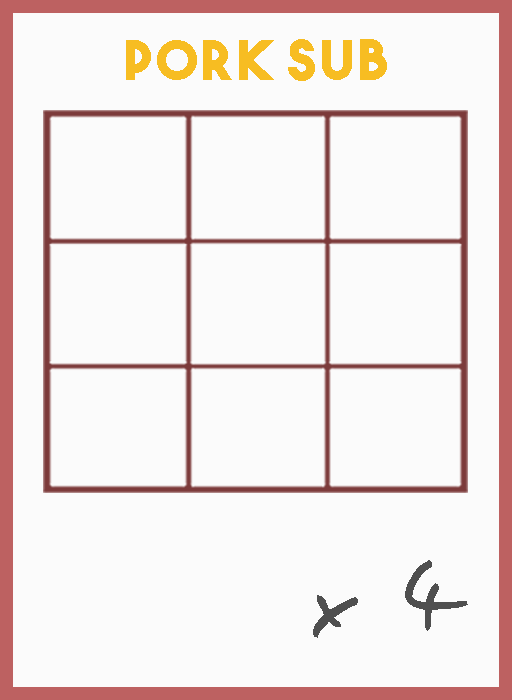
<style>
.page{position:relative;width:512px;height:700px;background:#fbfbfb}
.page>*{position:absolute;margin:0}
.t1{font:54.5px "TheBoldFont";letter-spacing:0.05em;color:#f7bd22}
.t2{font:106.1px "EasySpeech";letter-spacing:0.05em;color:#4f4f4f}
</style>
<div class="page">
<p class="t1" style="left:126px;top:39px;width:261px;height:42px">pork sub</p>
<p class="t2" style="left:313px;top:560px;width:155px;height:78px">x 4</p>
</div>
